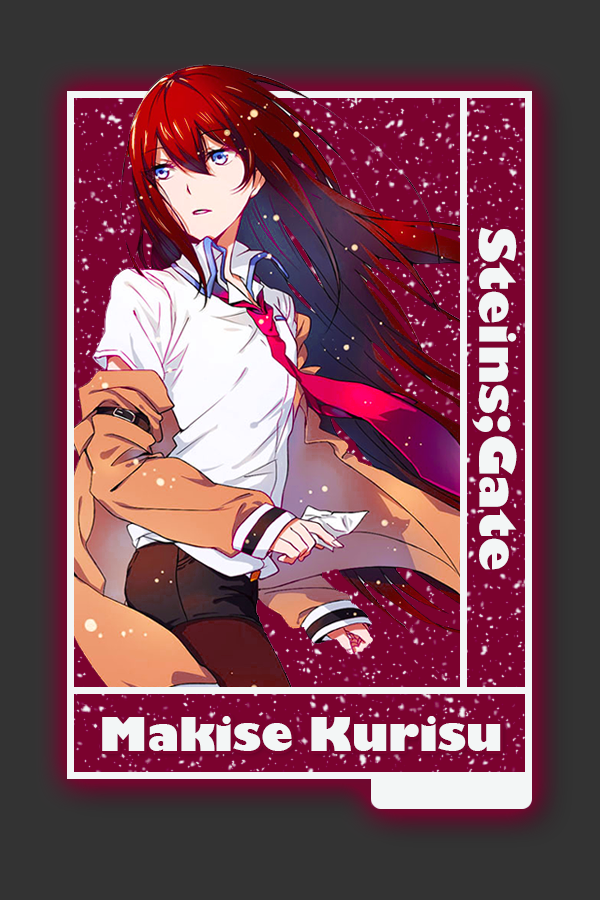
<style>
.page{position:relative;width:600px;height:900px;background:#333333}
.page>*{position:absolute;margin:0}
.t1{font:48.8px "GillSans-UltraBold";color:#f3f5f6}
.t2{font:45.6px "GillSans-UltraBold";color:#f3f5f6}
</style>
<div class="page">
<p class="t1" style="left:472px;top:227px;width:45px;height:343px;rotate:90deg">Steins;Gate</p>
<p class="t2" style="left:102px;top:716px;width:399px;height:35px">Makise Kurisu</p>
</div>
